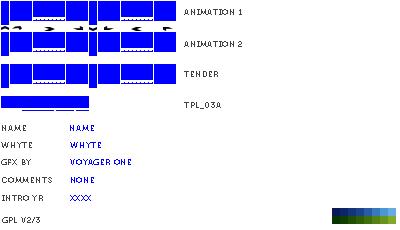
<style>
.page{position:relative;width:400px;height:230px;background:#ffffff}
.page>*{position:absolute;margin:0}
.t1{font:8px "Museo700-Regular";letter-spacing:0.075em;color:#404040;text-transform:uppercase}
.t2{font:8px "Museo700-Regular";letter-spacing:0.075em;color:#0000ff;text-transform:uppercase}
</style>
<div class="page">
<p class="t1" style="left:184px;top:9px;width:58px;height:6px">Animation 1</p>
<p class="t1" style="left:184px;top:41px;width:58px;height:6px">Animation 2</p>
<p class="t1" style="left:184px;top:71px;width:34px;height:6px">tender</p>
<p class="t1" style="left:184px;top:102px;width:37px;height:7px">tpl_03a</p>
<p class="t1" style="left:2px;top:125px;width:24px;height:6px">name</p>
<p class="t2" style="left:70px;top:125px;width:24px;height:6px">name</p>
<p class="t1" style="left:1px;top:142px;width:31px;height:6px">whyte</p>
<p class="t2" style="left:70px;top:142px;width:31px;height:6px">whyte</p>
<p class="t1" style="left:1px;top:159px;width:30px;height:6px">gfx by</p>
<p class="t2" style="left:70px;top:159px;width:61px;height:6px">voyager one</p>
<p class="t1" style="left:2px;top:177px;width:50px;height:6px">comments</p>
<p class="t2" style="left:71px;top:177px;width:23px;height:6px">none</p>
<p class="t1" style="left:2px;top:195px;width:41px;height:6px">intro yr</p>
<p class="t2" style="left:70px;top:195px;width:21px;height:6px">xxxx</p>
<p class="t1" style="left:2px;top:217px;width:38px;height:6px">gpl v2/3</p>
</div>
